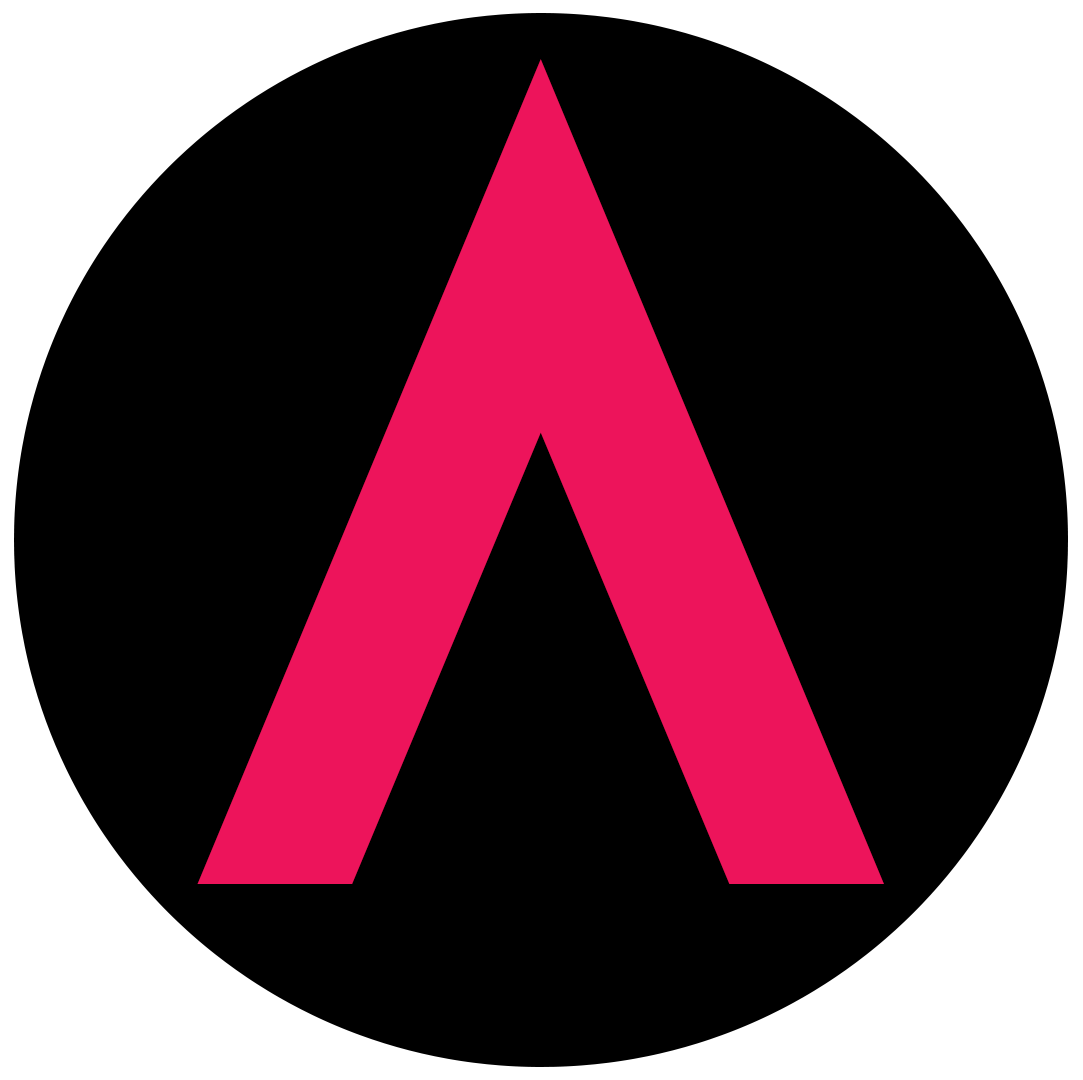
<style>
.page{position:relative;width:1083px;height:1080px;background:#000000}
.page>*{position:absolute;margin:0}
.t1{font:1256.6px "GameOfSquids";color:#ed145b;scale:0.87 1}
</style>
<div class="page">
<p class="t1" style="left:197px;top:59px;width:687px;height:825px">A</p>
</div>
